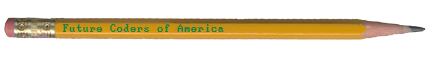
<style>
.page{position:relative;width:433px;height:58px;background:#ffffff}
.page>*{position:absolute;margin:0}
.t1{font:12px "PerfectDOSVGA437Win";color:#1a833f}
</style>
<div class="page">
<p class="t1" style="left:62px;top:24px;width:162px;height:8px">Future Coders of America</p>
</div>
